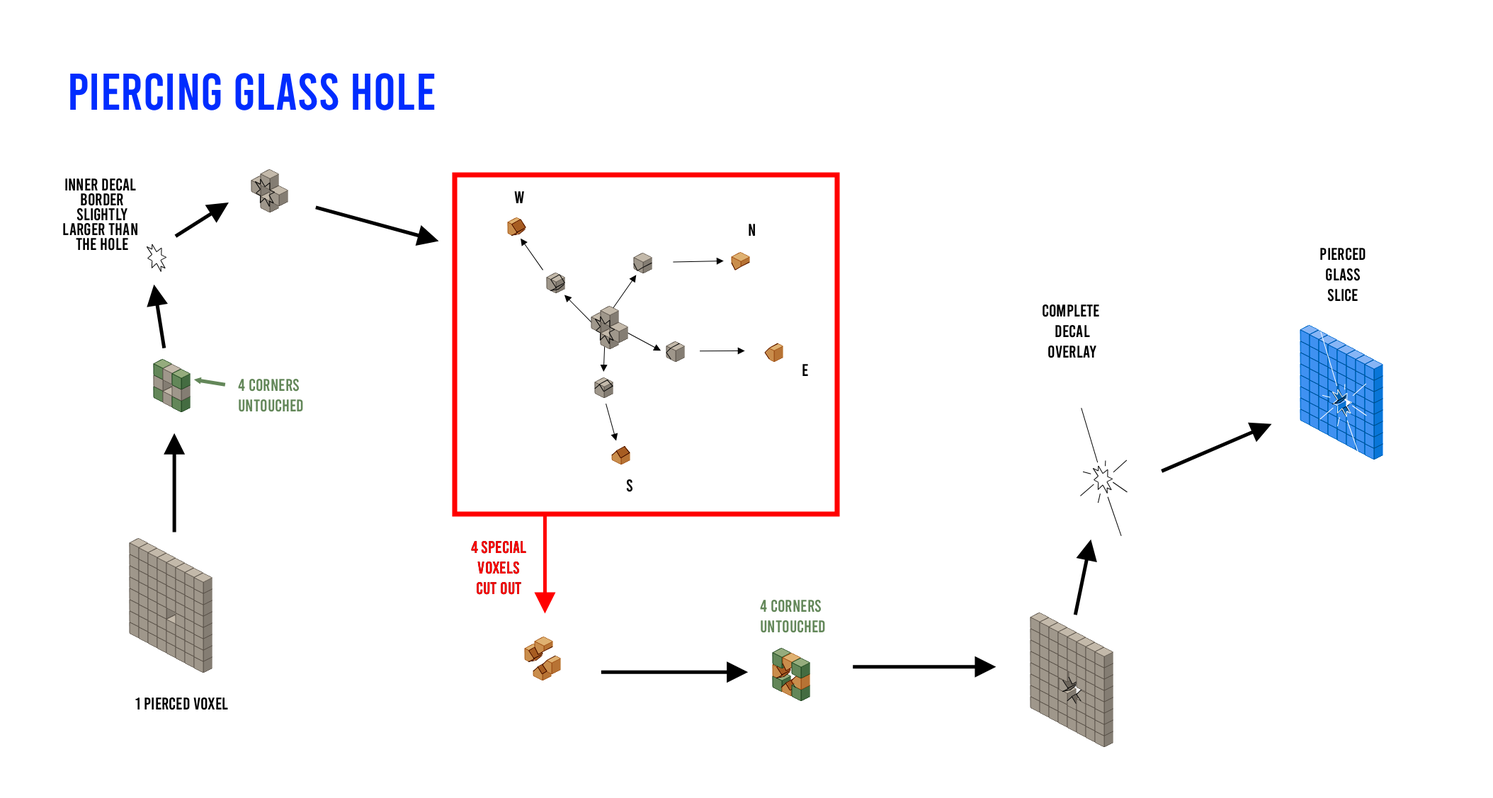
<style>
.page{position:relative;width:1493px;height:798px;background:#ffffff}
.page>*{position:absolute;margin:0}
.t1{font:51.7px "Bebas-Regular";color:#002cff}
.t2{font:17px/14.9px "Bebas-Regular";color:#000000}
.t3{font:17px "Bebas-Regular";color:#000000}
.t4{font:17px "Bebas-Regular";color:#638759}
.t5{font:17px "Bebas-Regular";color:#ff0000}
</style>
<div class="page">
<p class="t1" style="left:70px;top:73px;width:365px;height:38px">PIERCING GLASS HOLE</p>
<p class="t2" style="left:63px;top:178px;width:74px;height:73px;text-align:center">INNER DECAL <br>BORDER<br>SLIGHTLY<br>LARGER THAN <br>THE HOLE</p>
<p class="t3" style="left:514px;top:191px;width:10px;height:12px">W</p>
<p class="t3" style="left:749px;top:224px;width:6px;height:12px">N</p>
<p class="t3" style="left:1321px;top:247px;width:45px;height:55px;text-align:center">PIERCED<br>GLASS<br>SLICE</p>
<p class="t3" style="left:1043px;top:304px;width:57px;height:54px;text-align:center">COMPLETE <br>DECAL<br>OVERLAY</p>
<p class="t3" style="left:803px;top:364px;width:5px;height:12px">E</p>
<p class="t4" style="left:238px;top:378px;width:65px;height:34px">4 cORNERS<br>UNTOUCHED</p>
<p class="t3" style="left:626px;top:479px;width:7px;height:13px">S</p>
<p class="t5" style="left:471px;top:541px;width:55px;height:54px;text-align:center">4 Special<br>Voxels<br>cut out</p>
<p class="t5" style="left:471px;top:541px;width:55px;height:54px;text-align:center">4 Special<br>Voxels<br>cut out</p>
<p class="t4" style="left:760px;top:599px;width:65px;height:34px">4 cORNERS<br>UNTOUCHED</p>
<p class="t3" style="left:135px;top:697px;width:93px;height:14px">1 PIERCED VOXEL</p>
</div>
